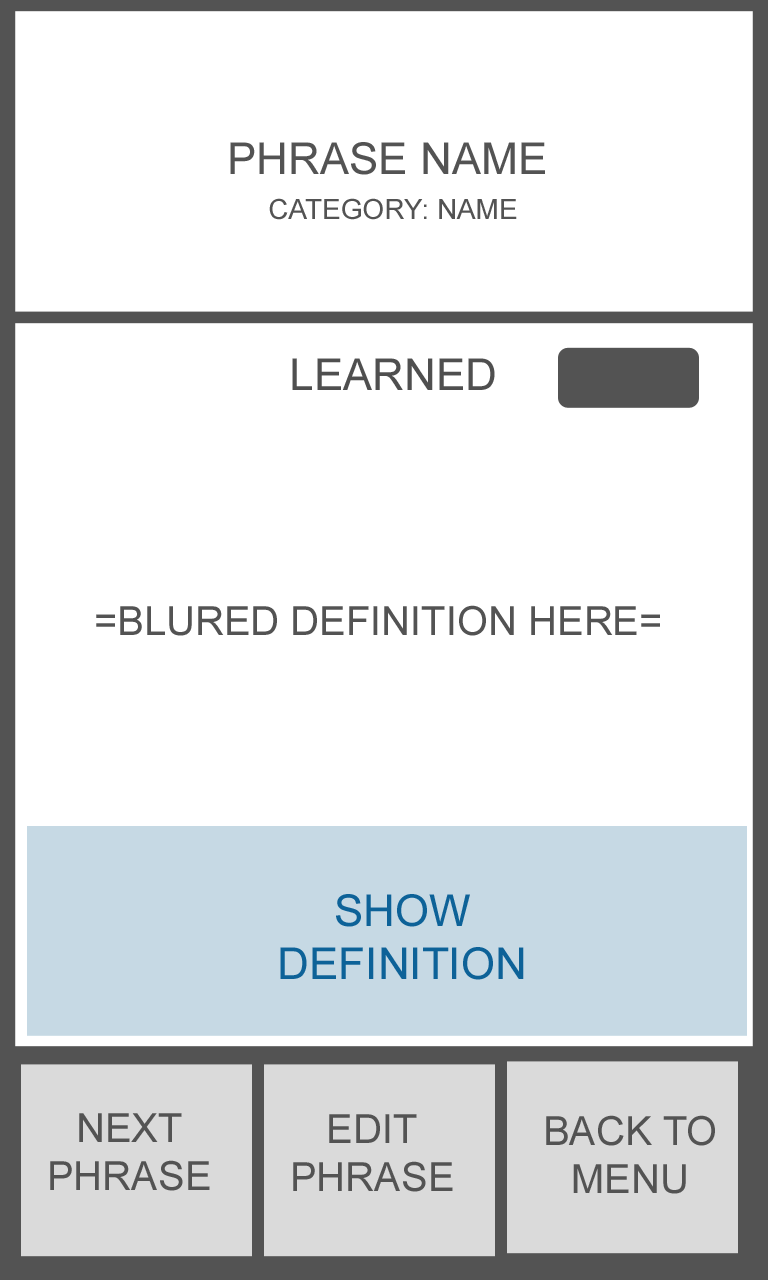
<style>
.page{position:relative;width:768px;height:1280px;background:#ffffff}
.page>*{position:absolute;margin:0}
.t1{font:44px "ArialMT";color:#535353}
.t2{font:28px "ArialMT";color:#535353}
.t3{font:44px "ArialMT";color:#4f4f4f}
.t4{font:40px "ArialMT";color:#535353}
.t5{font:44px "ArialMT";color:#0d6298}
</style>
<div class="page">
<p class="t1" style="left:230px;top:142px;width:315px;height:33px">PHRASE NAME</p>
<p class="t2" style="left:269px;top:198px;width:248px;height:22px">CATEGORY: NAME</p>
<p class="t3" style="left:292px;top:358px;width:203px;height:32px">LEARNED</p>
<p class="t4" style="left:96px;top:605px;width:564px;height:31px">=BLURED DEFINITION HERE=</p>
<p class="t5" style="left:280px;top:894px;width:244px;height:86px;text-align:center">SHOW<br>DEFINITION</p>
<p class="t4" style="left:50px;top:1113px;width:160px;height:78px;text-align:center">NEXT<br>PHRASE</p>
<p class="t4" style="left:293px;top:1114px;width:160px;height:78px;text-align:center">EDIT<br>PHRASE</p>
<p class="t4" style="left:546px;top:1115px;width:169px;height:79px;text-align:center">BACK TO<br>MENU</p>
</div>
